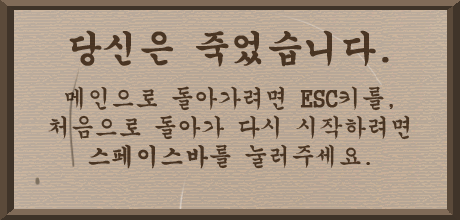
<style>
.page{position:relative;width:460px;height:220px}
.page>*{position:absolute;margin:0}
.t1{font:24px "GungsuhChe";color:#473423}
.t2{font:11.2px "GungsuhChe";color:#473423;font-weight:bold}
.t3{font:36px "GungsuhChe";color:#473423;font-weight:bold}
.t4{font:24px "GungsuhChe";color:#473423;font-weight:bold}
</style>
<div class="page">
<p class="t1" style="left:48px;top:30px;width:362px;height:139px;text-align:center"><span class="t2"><br></span><span class="t3">당신은 죽었습니다.<br><br></span>메인으로 돌아가려면 <span class="t4">ESC</span>키를,<br>처음으로 돌아가 다시 시작하려면 <span class="t4">스페이스바</span>를 눌러주세요.</p>
</div>
